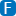
<style>
.page{position:relative;width:16px;height:16px;background:#0072bc}
.page>*{position:absolute;margin:0}
.t1{font:17px "AndaleMono";color:#ffffff}
</style>
<div class="page">
<p class="t1" style="left:4px;top:2px;width:8px;height:12px">F</p>
</div>
